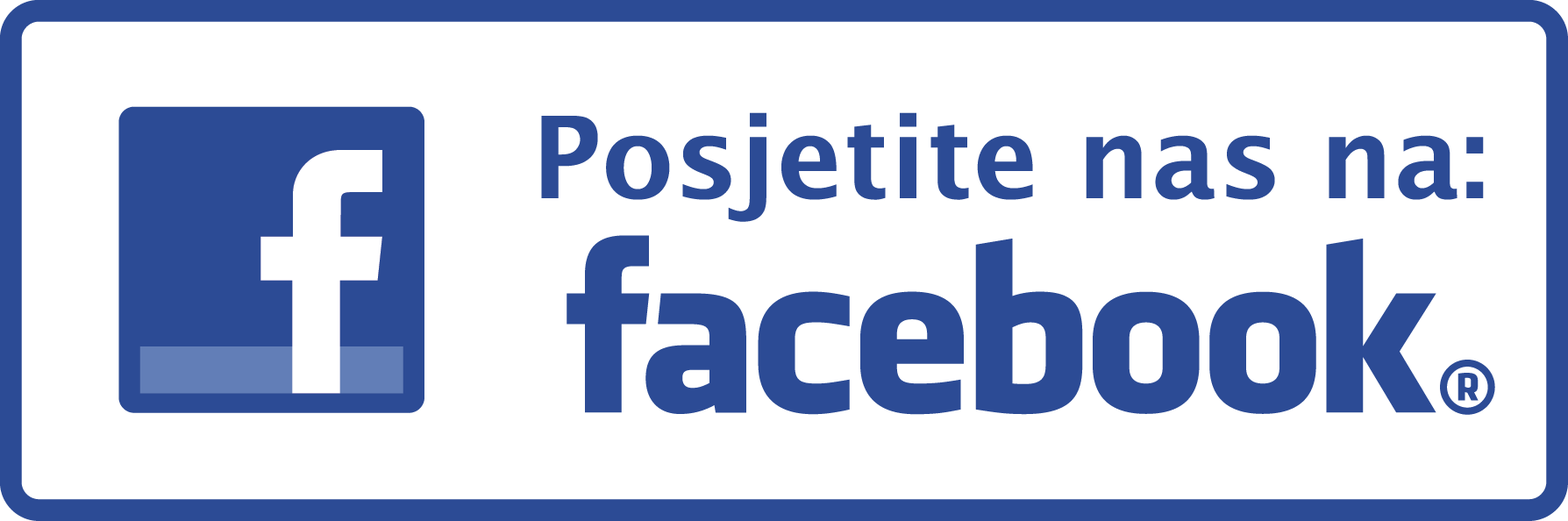
<style>
.page{position:relative;width:1568px;height:521px;background:#ffffff}
.page>*{position:absolute;margin:0}
.t1{font:114px "LucidaSans-Demi";color:#2c4b95}
</style>
<div class="page">
<p class="t1" style="left:541px;top:112px;width:943px;height:110px">Posjetite nas na:</p>
</div>
